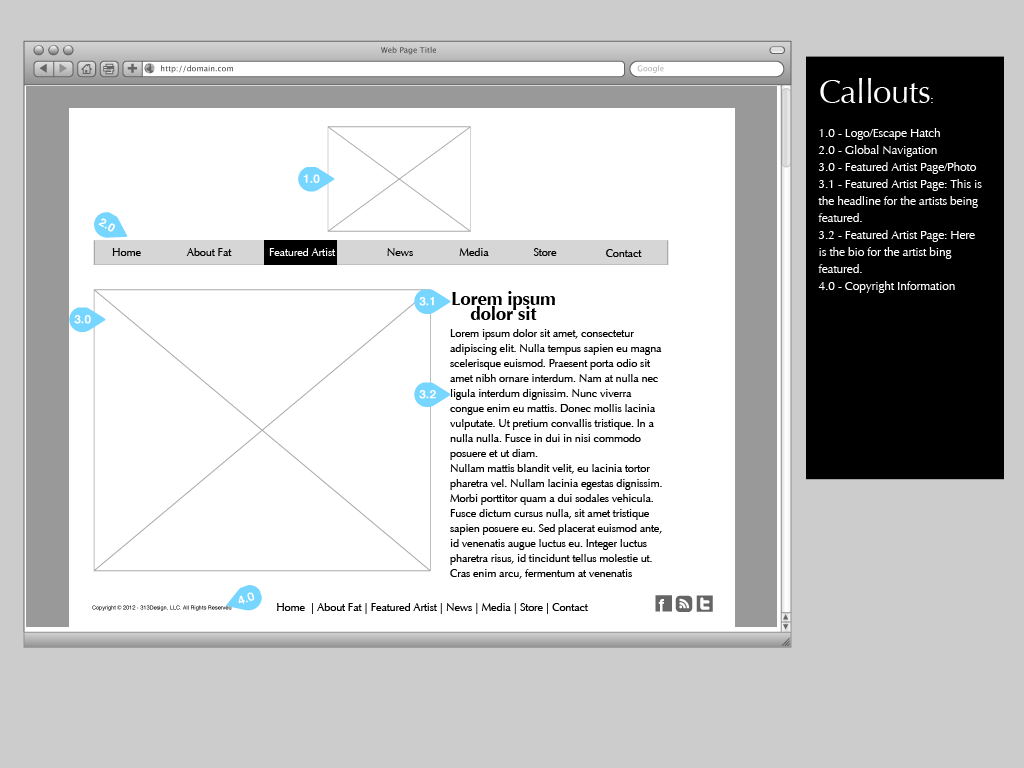
<style>
.page{position:relative;width:1024px;height:768px;background:#ffffff}
.page>*{position:absolute;margin:0}
.t1{font:12px/17px "Optima-Regular";letter-spacing:-0.015em;color:#ffffff}
.t2{font:33px/17px "Optima-Regular";letter-spacing:-0.015em;color:#ffffff}
.t3{font:11px "Optima-Regular";letter-spacing:-0.015em;color:#000000}
.t4{font:11px "Optima-Regular";letter-spacing:-0.015em;color:#ffffff}
.t5{font:19px "Optima-Bold";letter-spacing:-0.015em;color:#000000}
.t6{font:11px/15px "Optima-Regular";letter-spacing:-0.015em;color:#000000}
</style>
<div class="page">
<p class="t1" style="left:818px;top:78px;width:164px;height:215px"><span class="t2">Callouts</span>:<br><br>1.0 - Logo/Escape Hatch<br>2.0 - Global Navigation<br>3.0 - Featured Artist Page/Photo<br>3.1 - Featured Artist Page: This is the headline for the artists being featured.<br>3.2 - Featured Artist Page: Here is the bio for the artist bing featured.<br>4.0 - Copyright Information</p>
<p class="t3" style="left:112px;top:248px;width:29px;height:8px">Home</p>
<p class="t3" style="left:186px;top:248px;width:46px;height:8px">About Fat</p>
<p class="t4" style="left:269px;top:248px;width:67px;height:8px">Featured Artist</p>
<p class="t3" style="left:387px;top:248px;width:26px;height:8px">News</p>
<p class="t3" style="left:459px;top:248px;width:30px;height:8px">Media</p>
<p class="t3" style="left:533px;top:248px;width:24px;height:8px">Store</p>
<p class="t3" style="left:606px;top:249px;width:36px;height:8px">Contact</p>
<p class="t5" style="left:452px;top:291px;width:103px;height:29px">Lorem ipsum dolor sit</p>
<p class="t6" style="left:450px;top:329px;width:212px;height:250px">Lorem ipsum dolor sit amet, consectetur adipiscing elit. Nulla tempus sapien eu magna scelerisque euismod. Praesent porta odio sit amet nibh ornare interdum. Nam at nulla nec ligula interdum dignissim. Nunc viverra congue enim eu mattis. Donec mollis lacinia vulputate. Ut pretium convallis tristique. In a nulla nulla. Fusce in dui in nisi commodo posuere et ut diam.<br>Nullam mattis blandit velit, eu lacinia tortor pharetra vel. Nullam lacinia egestas dignissim. Morbi porttitor quam a dui sodales vehicula. Fusce dictum cursus nulla, sit amet tristique sapien posuere eu. Sed placerat euismod ante, id venenatis augue luctus eu. Integer luctus pharetra risus, id tincidunt tellus molestie ut. Cras enim arcu, fermentum at venenatis suscipit, auctor in odio. Cras dolor orci, mattis at rhoncus non, rutrum ac justo.</p>
<p class="t3" style="left:277px;top:603px;width:311px;height:11px">Home  | About Fat | Featured Artist | News | Media | Store | Contact</p>
</div>
